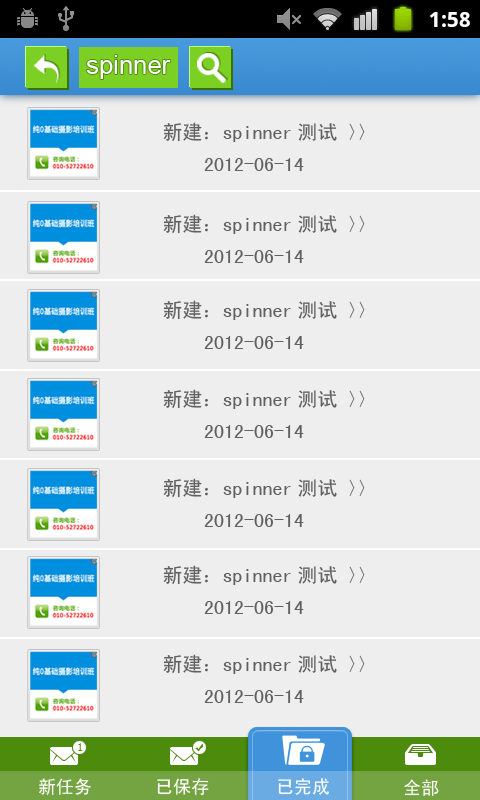
<style>
.page{position:relative;width:480px;height:800px;background:#eeeeee}
.page>*{position:absolute;margin:0}
.t1{font:25.7px "ArialMT";color:#ffffff}
.t2{font:20px "SimHei";color:#606060}
.t3{font:12px "SimSun";color:#4d8b0c}
.t4{font:18px "SimHei";color:#ffffff}
</style>
<div class="page">
<p class="t1" style="left:86px;top:55px;width:85px;height:24px">spinner</p>
<p class="t2" style="left:163px;top:122px;width:202px;height:20px">新建：spinner测试 〉〉</p>
<p class="t2" style="left:204px;top:158px;width:100px;height:13px">2012-06-14</p>
<p class="t2" style="left:163px;top:214px;width:202px;height:20px">新建：spinner测试 〉〉</p>
<p class="t2" style="left:204px;top:250px;width:100px;height:13px">2012-06-14</p>
<p class="t2" style="left:163px;top:300px;width:202px;height:20px">新建：spinner测试 〉〉</p>
<p class="t2" style="left:204px;top:336px;width:100px;height:13px">2012-06-14</p>
<p class="t2" style="left:163px;top:389px;width:202px;height:20px">新建：spinner测试 〉〉</p>
<p class="t2" style="left:204px;top:425px;width:100px;height:13px">2012-06-14</p>
<p class="t2" style="left:163px;top:478px;width:202px;height:20px">新建：spinner测试 〉〉</p>
<p class="t2" style="left:204px;top:514px;width:100px;height:13px">2012-06-14</p>
<p class="t2" style="left:163px;top:565px;width:202px;height:20px">新建：spinner测试 〉〉</p>
<p class="t2" style="left:204px;top:601px;width:100px;height:13px">2012-06-14</p>
<p class="t2" style="left:163px;top:654px;width:202px;height:20px">新建：spinner测试 〉〉</p>
<p class="t2" style="left:204px;top:690px;width:100px;height:13px">2012-06-14</p>
<p class="t3" style="left:78px;top:743px;width:5px;height:8px">1</p>
<p class="t4" style="left:39px;top:778px;width:52px;height:17px">新任务</p>
<p class="t4" style="left:157px;top:778px;width:52px;height:18px">已保存</p>
<p class="t4" style="left:278px;top:778px;width:51px;height:17px">已完成</p>
<p class="t4" style="left:404px;top:779px;width:35px;height:17px">全部</p>
</div>
